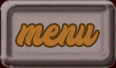
<style>
.page{position:relative;width:116px;height:68px}
.page>*{position:absolute;margin:0}
.t1{font:60px "Antique-Cherry---Personal-Use";color:#af712b}
</style>
<div class="page">
<p class="t1" style="left:17px;top:25px;width:81px;height:21px">menu</p>
</div>
